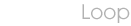
<style>
.page{position:relative;width:131px;height:26px;background:#ffffff}
.page>*{position:absolute;margin:0}
.t1{font:20px "Atlanta-Book";color:#b2b2b2}
</style>
<div class="page">
<p class="t1" style="left:82px;top:4px;width:48px;height:19px">Loop</p>
</div>
